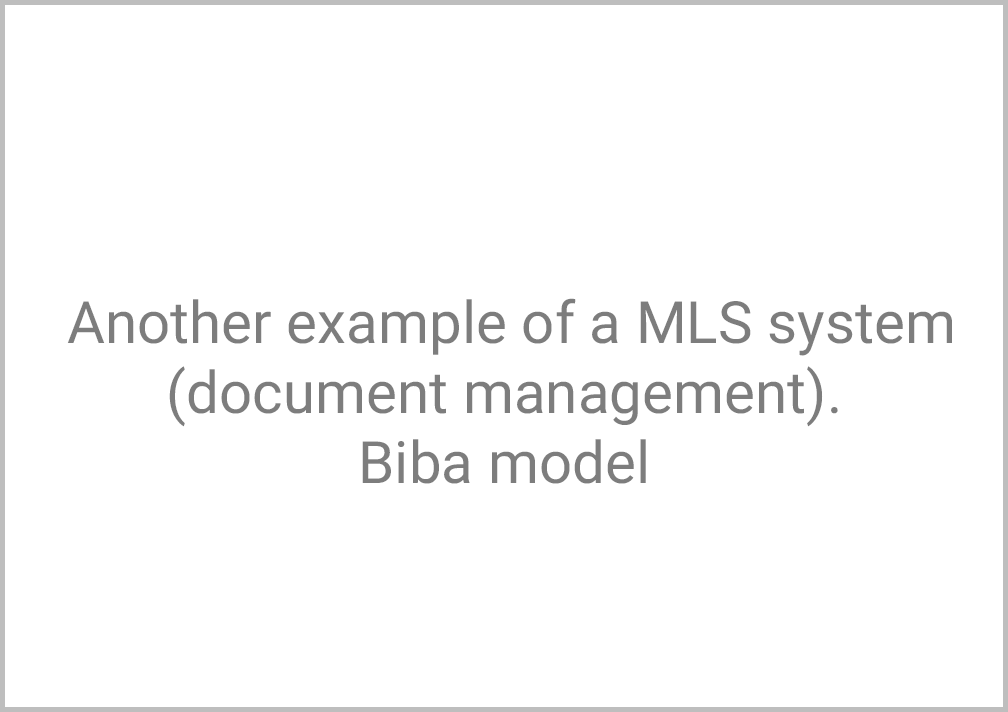
<style>
.page{position:relative;width:1008px;height:712px;background:#ffffff}
.page>*{position:absolute;margin:0}
.t1{font:58.3px "Roboto-Regular";color:#7d7d7d}
</style>
<div class="page">
<p class="t1" style="left:67px;top:298px;width:885px;height:186px;text-align:center">Another example of a MLS system (document management). <br>Biba model</p>
</div>
